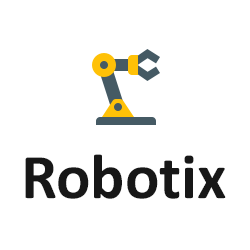
<style>
.page{position:relative;width:250px;height:250px;background:#ffffff}
.page>*{position:absolute;margin:0}
.t1{font:64px "Calibri-Bold";color:#171717}
</style>
<div class="page">
<p class="t1" style="left:25px;top:154px;width:201px;height:45px">Robotix</p>
</div>
